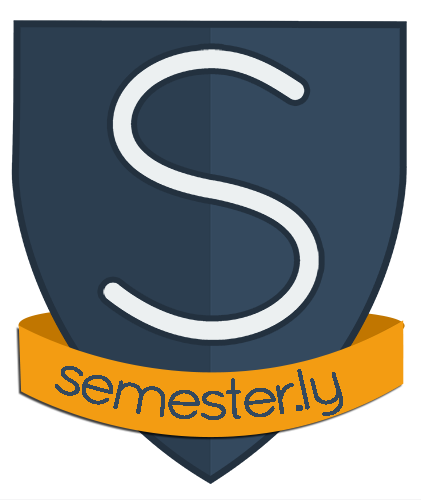
<style>
.page{position:relative;width:421px;height:500px;background:#ffffff}
.page>*{position:absolute;margin:0}
.t1{font:58.4px "Quicksand-Regular";letter-spacing:-0.1em;color:#34495e}
</style>
<div class="page">
<p class="t1" style="left:55px;top:366px;width:288px;height:54px;rotate:2deg">semester.ly</p>
</div>
